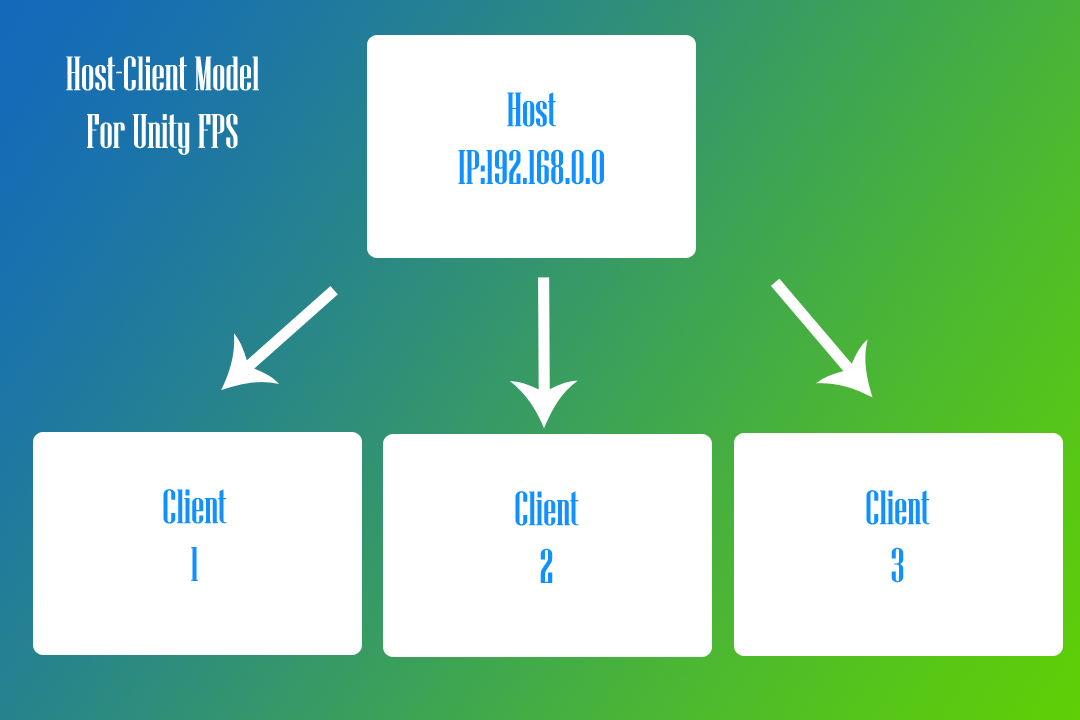
<style>
.page{position:relative;width:1080px;height:720px;background:#ffffff}
.page>*{position:absolute;margin:0}
.t1{font:48px "NiagaraSolid-Reg";color:#ffffff}
.t2{font:48px "NiagaraSolid-Reg";color:#1091ff}
</style>
<div class="page">
<p class="t1" style="left:66px;top:56px;width:193px;height:99px;text-align:center">Host-Client Model <br>For Unity FPS</p>
<p class="t2" style="left:458px;top:92px;width:146px;height:93px;text-align:center">Host<br>IP:192.168.0.0</p>
<p class="t2" style="left:163px;top:489px;width:64px;height:92px;text-align:center">Client<br>1</p>
<p class="t2" style="left:515px;top:491px;width:64px;height:92px;text-align:center">Client<br>2</p>
<p class="t2" style="left:866px;top:490px;width:64px;height:93px;text-align:center">Client<br>3</p>
</div>
